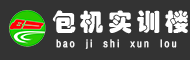
<style>
.page{position:relative;width:190px;height:60px;background:#333333}
.page>*{position:absolute;margin:0}
.t1{font:24px "STHupo";letter-spacing:0.18em;color:#ffffff}
.t2{font:10px "FZYTK--GBK1-0";letter-spacing:0.18em;color:#ffffff;font-weight:bold}
</style>
<div class="page">
<p class="t1" style="left:52px;top:10px;width:136px;height:24px">包机实训楼</p>
<p class="t2" style="left:56px;top:39px;width:121px;height:10px">bao  ji  shi  xun  lou</p>
</div>
